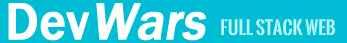
<style>
.page{position:relative;width:347px;height:43px;background:#00bcd4}
.page>*{position:absolute;margin:0}
.t1{font:54px "FranklinGothic-Medium";color:#ffffff;font-weight:bold;font-style:italic;scale:0.92 1}
.t2{font:54px "FranklinGothic-Medium";color:#ffffff;font-weight:bold;scale:0.92 1}
.t3{font:18px "OswaldStencil-Bold";color:#bdf9fb}
</style>
<div class="page">
<p class="t1" style="left:8px;top:3px;width:198px;height:38px"><span class="t2">Dev</span>Wars</p>
<p class="t3" style="left:221px;top:19px;width:114px;height:17px">full Stack Web</p>
</div>
